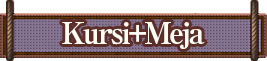
<style>
.page{position:relative;width:267px;height:61px;background:#ffffff}
.page>*{position:absolute;margin:0}
.t1{font:30px "RyuminPro-ExBold";letter-spacing:-0.08em;color:#fffff7}
</style>
<div class="page">
<p class="t1" style="left:62px;top:22px;width:143px;height:27px">Kursi+Meja</p>
</div>
